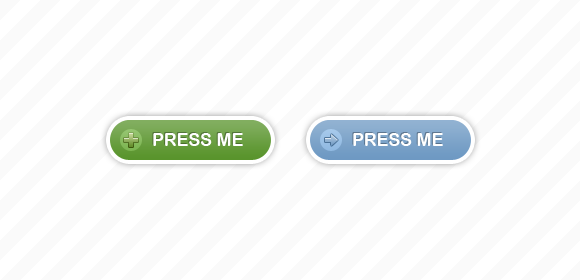
<style>
.page{position:relative;width:580px;height:280px;background:#ffffff}
.page>*{position:absolute;margin:0}
.t1{font:18px "ArialRoundedMTBold";color:#ffffff;text-transform:uppercase}
</style>
<div class="page">
<p class="t1" style="left:153px;top:133px;width:90px;height:13px">Press me</p>
<p class="t1" style="left:353px;top:133px;width:90px;height:13px">Press me</p>
</div>
